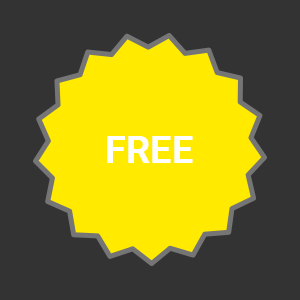
<style>
.page{position:relative;width:300px;height:300px;background:#333333}
.page>*{position:absolute;margin:0}
.t1{font:38px "Roboto-Bold";color:#e9e9e9}
</style>
<div class="page">
<p class="t1" style="left:107px;top:136px;width:86px;height:27px">FREE</p>
</div>
